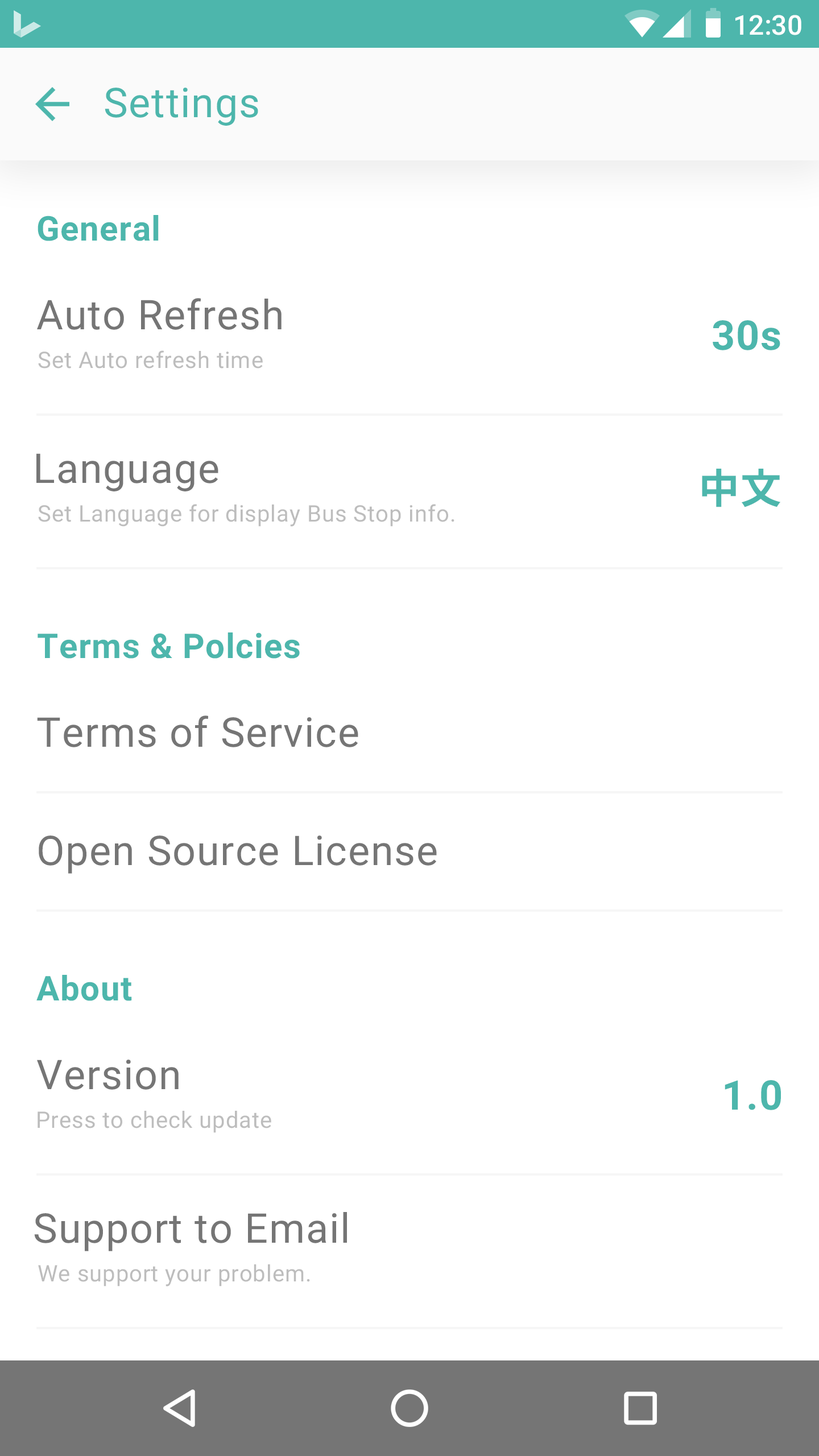
<style>
.page{position:relative;width:819px;height:1456px;background:#ffffff}
.page>*{position:absolute;margin:0}
.t1{font:27.3px "Roboto-Medium";color:#ffffff}
.t2{font:40.9px "Roboto-Regular";letter-spacing:0.025em;color:#4db6ac}
.t3{font:34.1px "Roboto-Bold";letter-spacing:0.025em;color:#4db6ac}
.t4{font:40.9px "Roboto-Regular";letter-spacing:0.025em;color:#757575}
.t5{font:40.9px "Roboto-Bold";letter-spacing:0.025em;color:#4db6ac}
.t6{font:22.7px "Roboto-Regular";letter-spacing:0.025em;color:#bdbdbd}
.t7{font:40.9px "NotoSansCJKkr-Bold";letter-spacing:0.025em;color:#4db6ac}
</style>
<div class="page">
<p class="t1" style="left:735px;top:15px;width:66px;height:20px">12:30</p>
<p class="t2" style="left:105px;top:88px;width:153px;height:38px">Settings</p>
<p class="t3" style="left:38px;top:215px;width:121px;height:26px">General</p>
<p class="t4" style="left:37px;top:298px;width:245px;height:32px">Auto Refresh</p>
<p class="t5" style="left:713px;top:320px;width:67px;height:30px">30s</p>
<p class="t6" style="left:38px;top:350px;width:225px;height:19px">Set Auto refresh time</p>
<p class="t4" style="left:36px;top:453px;width:182px;height:38px">Language</p>
<p class="t7" style="left:702px;top:469px;width:79px;height:38px">中文</p>
<p class="t6" style="left:38px;top:504px;width:416px;height:23px">Set Language for display Bus Stop info.</p>
<p class="t3" style="left:38px;top:632px;width:262px;height:27px">Terms &amp; Polcies</p>
<p class="t4" style="left:37px;top:715px;width:321px;height:32px">Terms of Service</p>
<p class="t4" style="left:39px;top:835px;width:398px;height:39px">Open Source License</p>
<p class="t3" style="left:36px;top:975px;width:96px;height:26px">About</p>
<p class="t4" style="left:37px;top:1060px;width:142px;height:30px">Version</p>
<p class="t5" style="left:725px;top:1080px;width:56px;height:30px">1.0</p>
<p class="t6" style="left:38px;top:1111px;width:233px;height:22px">Press to check update</p>
<p class="t4" style="left:34px;top:1212px;width:313px;height:39px">Support to Email</p>
<p class="t6" style="left:38px;top:1264px;width:272px;height:22px">We support your problem.</p>
</div>
